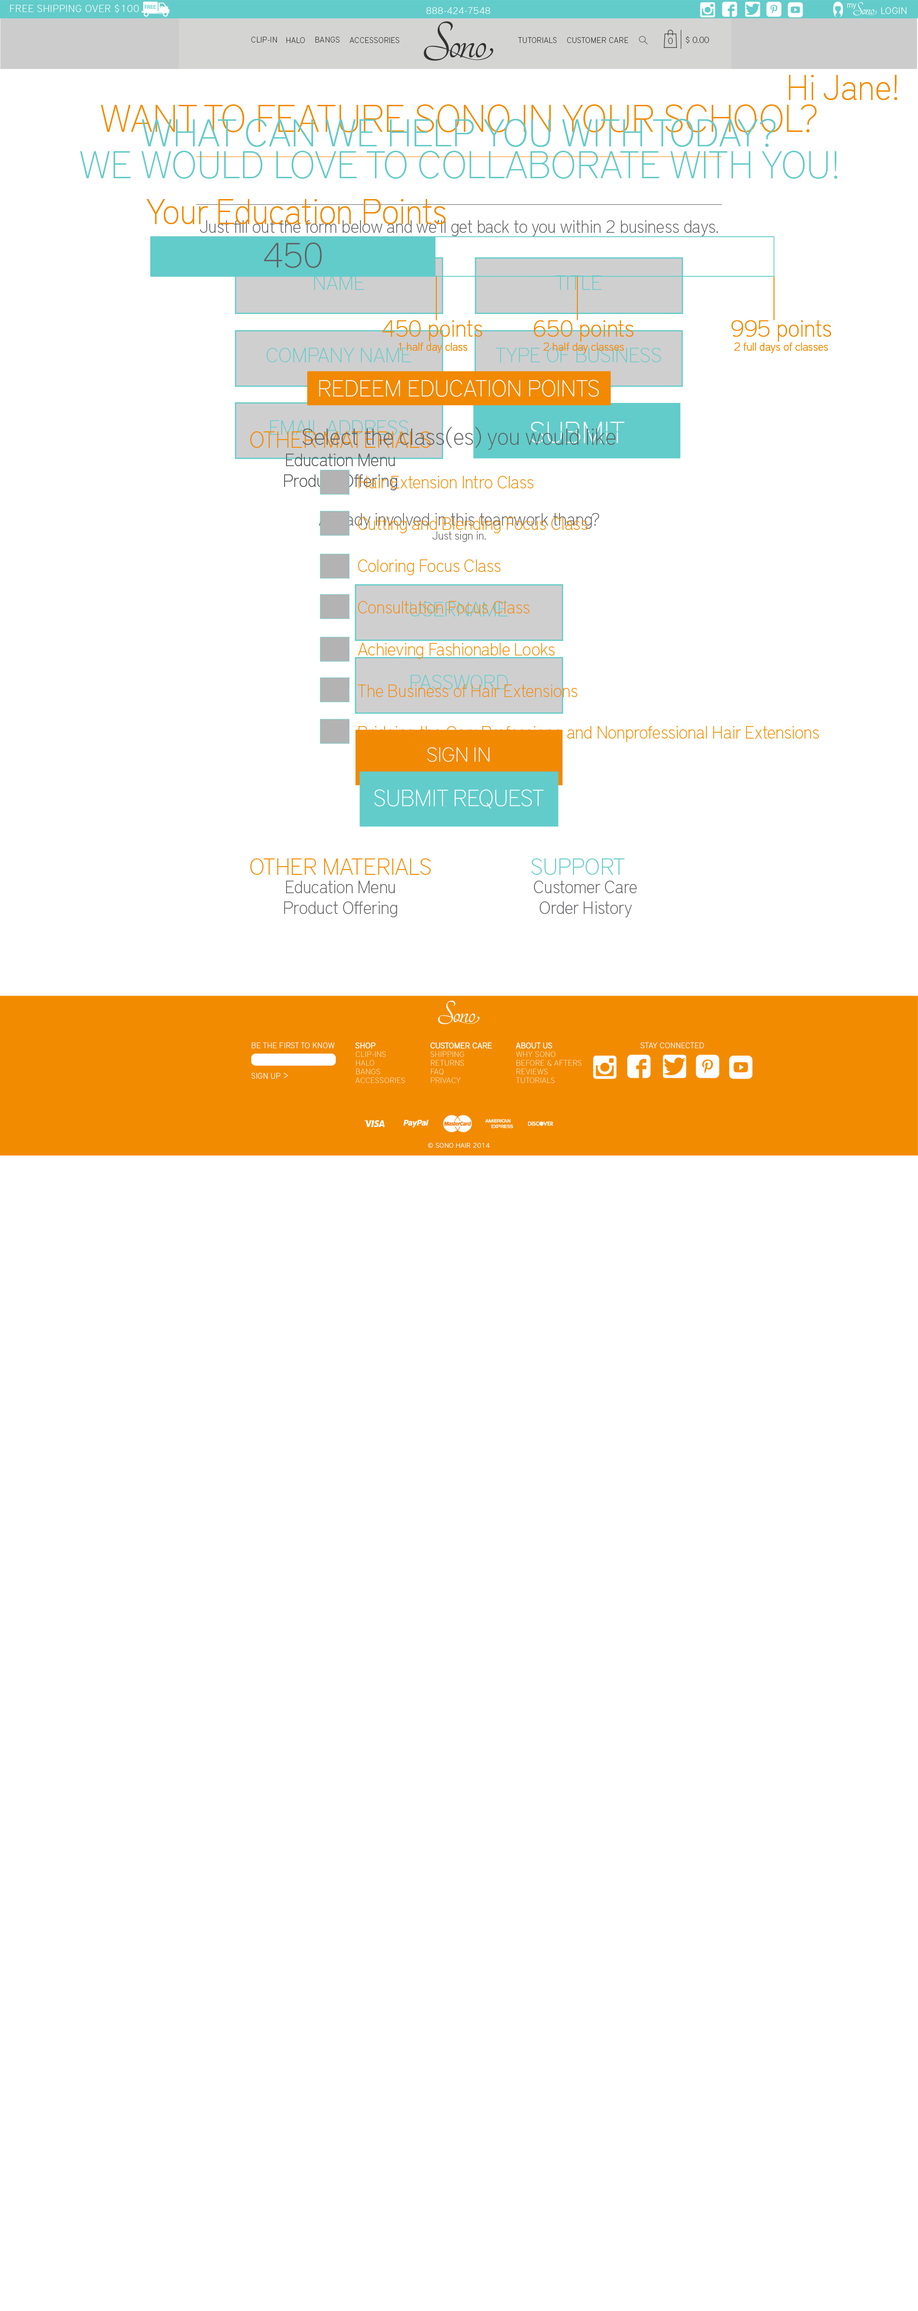
<style>
.page{position:relative;width:918px;height:2311px;background:#ffffff}
.page>*{position:absolute;margin:0}
.t1{font:10.1px "DistrictPro-Thin";letter-spacing:0.05em;color:#ffffff}
.t2{font:8px "DistrictPro-Thin";color:#ffffff}
.t3{font:9.2px "DistrictPro-Thin";letter-spacing:0.05em;color:#ffffff}
.t4{font:9.4px "DistrictPro-Thin";letter-spacing:0.05em;color:#ffffff}
.t5{font:7.7px "DistrictPro-Thin";letter-spacing:0.05em;color:#323232}
.t6{font:8.8px "DistrictPro-Thin";color:#323232}
.t7{font:34.8px "DistrictPro-Thin";color:#f38b00}
.t8{font:38.7px "DistrictPro-Thin";color:#65cbc9}
.t9{font:38.7px "DistrictPro-Thin";color:#f38b00}
.t10{font:17.4px "DistrictPro-Thin";color:#5f6062}
.t11{font:20.5px "DistrictPro-Thin";color:#65cbc9}
.t12{font:11.6px "DistrictPro-Thin";color:#f38b00}
.t13{font:23.2px "DistrictPro-Thin";color:#f38b00}
.t14{font:29.6px "DistrictPro-Thin";color:#ffffff}
.t15{font:23.2px "DistrictPro-Thin";color:#5f6062}
.t16{font:17.4px "DistrictPro-Thin";color:#f38b00}
.t17{font:11.6px "DistrictPro-Thin";color:#5f6062}
.t18{font:20.5px "DistrictPro-Thin";color:#ffffff}
.t19{font:23.2px "DistrictPro-Thin";color:#65cbc9}
.t20{font:7.7px "DistrictPro-Thin";letter-spacing:0.05em;color:#ffffff}
.t21{font:8.7px "DistrictPro-Thin";letter-spacing:0.05em;color:#ffffff}
.t22{font:6.8px "DistrictPro-Thin";letter-spacing:0.05em;color:#ffffff}
</style>
<div class="page">
<p class="t1" style="left:10px;top:4px;width:129px;height:9px">FREE SHIPPING OVER $100</p>
<p class="t1" style="left:10px;top:4px;width:129px;height:9px">FREE SHIPPING OVER $100</p>
<p class="t1" style="left:10px;top:4px;width:129px;height:9px">FREE SHIPPING OVER $100</p>
<p class="t1" style="left:10px;top:4px;width:129px;height:9px">FREE SHIPPING OVER $100</p>
<p class="t2" style="left:847px;top:3px;width:9px;height:6px">my</p>
<p class="t2" style="left:847px;top:3px;width:9px;height:6px">my</p>
<p class="t2" style="left:847px;top:3px;width:9px;height:6px">my</p>
<p class="t2" style="left:847px;top:3px;width:9px;height:6px">my</p>
<p class="t3" style="left:426px;top:7px;width:64px;height:7px">888-424-7548</p>
<p class="t3" style="left:426px;top:7px;width:64px;height:7px">888-424-7548</p>
<p class="t3" style="left:426px;top:7px;width:64px;height:7px">888-424-7548</p>
<p class="t3" style="left:426px;top:7px;width:64px;height:7px">888-424-7548</p>
<p class="t4" style="left:881px;top:7px;width:25px;height:7px">LOGIN</p>
<p class="t4" style="left:881px;top:7px;width:25px;height:7px">LOGIN</p>
<p class="t4" style="left:881px;top:7px;width:25px;height:7px">LOGIN</p>
<p class="t4" style="left:881px;top:7px;width:25px;height:7px">LOGIN</p>
<p class="t5" style="left:251px;top:37px;width:26px;height:6px">CLIP-IN</p>
<p class="t5" style="left:251px;top:37px;width:26px;height:6px">CLIP-IN</p>
<p class="t5" style="left:251px;top:37px;width:26px;height:6px">CLIP-IN</p>
<p class="t5" style="left:251px;top:37px;width:26px;height:6px">CLIP-IN</p>
<p class="t5" style="left:286px;top:37px;width:19px;height:6px">HALO</p>
<p class="t5" style="left:286px;top:37px;width:19px;height:6px">HALO</p>
<p class="t5" style="left:286px;top:37px;width:19px;height:6px">HALO</p>
<p class="t5" style="left:286px;top:37px;width:19px;height:6px">HALO</p>
<p class="t5" style="left:315px;top:37px;width:25px;height:6px">BANGS</p>
<p class="t5" style="left:315px;top:37px;width:25px;height:6px">BANGS</p>
<p class="t5" style="left:315px;top:37px;width:25px;height:6px">BANGS</p>
<p class="t5" style="left:315px;top:37px;width:25px;height:6px">BANGS</p>
<p class="t5" style="left:350px;top:37px;width:50px;height:6px">ACCESSORIES</p>
<p class="t5" style="left:350px;top:37px;width:50px;height:6px">ACCESSORIES</p>
<p class="t5" style="left:350px;top:37px;width:50px;height:6px">ACCESSORIES</p>
<p class="t5" style="left:350px;top:37px;width:50px;height:6px">ACCESSORIES</p>
<p class="t5" style="left:518px;top:37px;width:39px;height:6px">TUTORIALS</p>
<p class="t5" style="left:518px;top:37px;width:39px;height:6px">TUTORIALS</p>
<p class="t5" style="left:518px;top:37px;width:39px;height:6px">TUTORIALS</p>
<p class="t5" style="left:518px;top:37px;width:39px;height:6px">TUTORIALS</p>
<p class="t5" style="left:567px;top:37px;width:62px;height:6px">CUSTOMER CARE</p>
<p class="t5" style="left:567px;top:37px;width:62px;height:6px">CUSTOMER CARE</p>
<p class="t5" style="left:567px;top:37px;width:62px;height:6px">CUSTOMER CARE</p>
<p class="t5" style="left:567px;top:37px;width:62px;height:6px">CUSTOMER CARE</p>
<p class="t6" style="left:668px;top:38px;width:5px;height:6px">0</p>
<p class="t6" style="left:668px;top:38px;width:5px;height:6px">0</p>
<p class="t6" style="left:668px;top:38px;width:5px;height:6px">0</p>
<p class="t6" style="left:668px;top:38px;width:5px;height:6px">0</p>
<p class="t6" style="left:686px;top:36px;width:23px;height:7px">$ 0.00</p>
<p class="t6" style="left:686px;top:36px;width:23px;height:7px">$ 0.00</p>
<p class="t6" style="left:686px;top:36px;width:23px;height:7px">$ 0.00</p>
<p class="t6" style="left:686px;top:36px;width:23px;height:7px">$ 0.00</p>
<p class="t7" style="left:789px;top:75px;width:108px;height:25px">Hi Jane!</p>
<p class="t7" style="left:789px;top:75px;width:108px;height:25px">Hi Jane!</p>
<p class="t7" style="left:789px;top:75px;width:108px;height:25px">Hi Jane!</p>
<p class="t8" style="left:80px;top:104px;width:757px;height:75px;text-align:center"><span class="t9">WANT TO FEATURE SONO IN YOUR SCHOOL?<br></span>WE WOULD LOVE TO COLLABORATE WITH YOU!</p>
<p class="t8" style="left:142px;top:119px;width:633px;height:28px">WHAT CAN WE HELP YOU WITH TODAY?</p>
<p class="t8" style="left:142px;top:119px;width:633px;height:28px">WHAT CAN WE HELP YOU WITH TODAY?</p>
<p class="t8" style="left:142px;top:119px;width:633px;height:28px">WHAT CAN WE HELP YOU WITH TODAY?</p>
<p class="t7" style="left:146px;top:199px;width:299px;height:25px">Your Education Points</p>
<p class="t7" style="left:146px;top:199px;width:299px;height:25px">Your Education Points</p>
<p class="t7" style="left:146px;top:199px;width:299px;height:25px">Your Education Points</p>
<p class="t10" style="left:200px;top:220px;width:518px;height:16px">Just fill out the form below and we’ll get back to you within 2 business days.</p>
<p class="t11" style="left:314px;top:275px;width:50px;height:15px">NAME</p>
<p class="t11" style="left:556px;top:275px;width:46px;height:15px">TITLE</p>
<p class="t12" style="left:382px;top:320px;width:100px;height:33px;text-align:center"><span class="t13">450 points<br></span>1 half day class</p>
<p class="t12" style="left:382px;top:320px;width:100px;height:33px;text-align:center"><span class="t13">450 points<br></span>1 half day class</p>
<p class="t12" style="left:382px;top:320px;width:100px;height:33px;text-align:center"><span class="t13">450 points<br></span>1 half day class</p>
<p class="t12" style="left:534px;top:320px;width:99px;height:33px;text-align:center"><span class="t13">650 points<br></span>2 half day classes</p>
<p class="t12" style="left:534px;top:320px;width:99px;height:33px;text-align:center"><span class="t13">650 points<br></span>2 half day classes</p>
<p class="t12" style="left:534px;top:320px;width:99px;height:33px;text-align:center"><span class="t13">650 points<br></span>2 half day classes</p>
<p class="t12" style="left:731px;top:320px;width:100px;height:33px;text-align:center"><span class="t13">995 points<br></span>2 full days of classes</p>
<p class="t12" style="left:731px;top:320px;width:100px;height:33px;text-align:center"><span class="t13">995 points<br></span>2 full days of classes</p>
<p class="t12" style="left:731px;top:320px;width:100px;height:33px;text-align:center"><span class="t13">995 points<br></span>2 full days of classes</p>
<p class="t11" style="left:267px;top:348px;width:144px;height:14px">COMPANY NAME</p>
<p class="t11" style="left:496px;top:348px;width:165px;height:14px">TYPE OF BUSINESS</p>
<p class="t11" style="left:270px;top:420px;width:138px;height:15px">EMAIL ADDRESS</p>
<p class="t14" style="left:530px;top:422px;width:95px;height:21px">SUBMIT</p>
<p class="t13" style="left:250px;top:431px;width:181px;height:17px">OTHER MATERIALS</p>
<p class="t13" style="left:250px;top:431px;width:181px;height:17px">OTHER MATERIALS</p>
<p class="t15" style="left:302px;top:427px;width:314px;height:23px">Select the class(es) you would like</p>
<p class="t10" style="left:284px;top:454px;width:113px;height:36px;text-align:center">Education Menu<br>Product Offering</p>
<p class="t10" style="left:284px;top:454px;width:113px;height:36px;text-align:center">Education Menu<br>Product Offering</p>
<p class="t16" style="left:358px;top:476px;width:461px;height:266px">Hair Extension Intro Class<br><br>Cutting and Blending Focus Class<br><br>Coloring Focus Class<br><br>Consultation Focus Class<br><br>Achieving Fashionable Looks<br><br>The Business of Hair Extensions<br><br>Bridging the Gap: Professiona and Nonprofessional Hair Extensions</p>
<p class="t10" style="left:319px;top:513px;width:280px;height:29px;text-align:center">Already involved in this teamwork thang?<br><span class="t17">Just sign in.</span></p>
<p class="t11" style="left:410px;top:602px;width:98px;height:14px">USERNAME</p>
<p class="t11" style="left:411px;top:675px;width:97px;height:14px">PASSWORD</p>
<p class="t18" style="left:427px;top:747px;width:62px;height:15px">SIGN IN</p>
<p class="t13" style="left:250px;top:859px;width:181px;height:16px">OTHER MATERIALS</p>
<p class="t19" style="left:531px;top:859px;width:94px;height:16px">SUPPORT</p>
<p class="t10" style="left:284px;top:881px;width:113px;height:36px;text-align:center">Education Menu<br>Product Offering</p>
<p class="t10" style="left:534px;top:881px;width:103px;height:36px;text-align:center">Customer Care<br>Order History</p>
<p class="t20" style="left:252px;top:1043px;width:82px;height:5px">BE THE FIRST TO KNOW</p>
<p class="t20" style="left:252px;top:1043px;width:82px;height:5px">BE THE FIRST TO KNOW</p>
<p class="t20" style="left:252px;top:1043px;width:82px;height:5px">BE THE FIRST TO KNOW</p>
<p class="t20" style="left:252px;top:1043px;width:82px;height:5px">BE THE FIRST TO KNOW</p>
<p class="t20" style="left:641px;top:1043px;width:63px;height:5px">STAY CONNECTED</p>
<p class="t20" style="left:641px;top:1043px;width:63px;height:5px">STAY CONNECTED</p>
<p class="t20" style="left:641px;top:1043px;width:63px;height:5px">STAY CONNECTED</p>
<p class="t20" style="left:641px;top:1043px;width:63px;height:5px">STAY CONNECTED</p>
<p class="t20" style="left:251px;top:1073px;width:37px;height:6px">SIGN UP <span class="t21">&gt;</span></p>
<p class="t20" style="left:251px;top:1073px;width:37px;height:6px">SIGN UP <span class="t21">&gt;</span></p>
<p class="t20" style="left:251px;top:1073px;width:37px;height:6px">SIGN UP <span class="t21">&gt;</span></p>
<p class="t20" style="left:251px;top:1073px;width:37px;height:6px">SIGN UP <span class="t21">&gt;</span></p>
<p class="t22" style="left:428px;top:1143px;width:62px;height:5px">© SONO HAIR 2014</p>
<p class="t22" style="left:428px;top:1143px;width:62px;height:5px">© SONO HAIR 2014</p>
<p class="t22" style="left:428px;top:1143px;width:62px;height:5px">© SONO HAIR 2014</p>
<p class="t22" style="left:428px;top:1143px;width:62px;height:5px">© SONO HAIR 2014</p>
</div>
